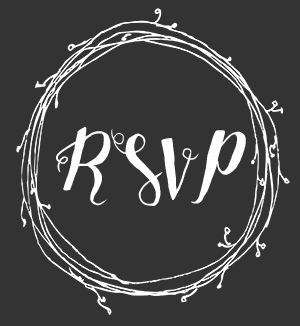
<style>
.page{position:relative;width:300px;height:326px;background:#333333}
.page>*{position:absolute;margin:0}
.t1{font:83.3px "LaserMetal";color:#ffffff}
</style>
<div class="page">
<p class="t1" style="left:56px;top:127px;width:190px;height:79px">RSVP</p>
</div>
